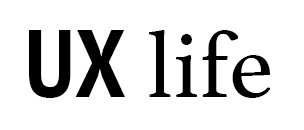
<style>
.page{position:relative;width:304px;height:130px;background:#ffffff}
.page>*{position:absolute;margin:0}
.t1{font:96px "Athelas-Regular";color:#000000}
.t2{font:96px "PTSans-NarrowBold";color:#000000}
</style>
<div class="page">
<p class="t1" style="left:29px;top:30px;width:242px;height:68px"><span class="t2">UX</span> life</p>
</div>
